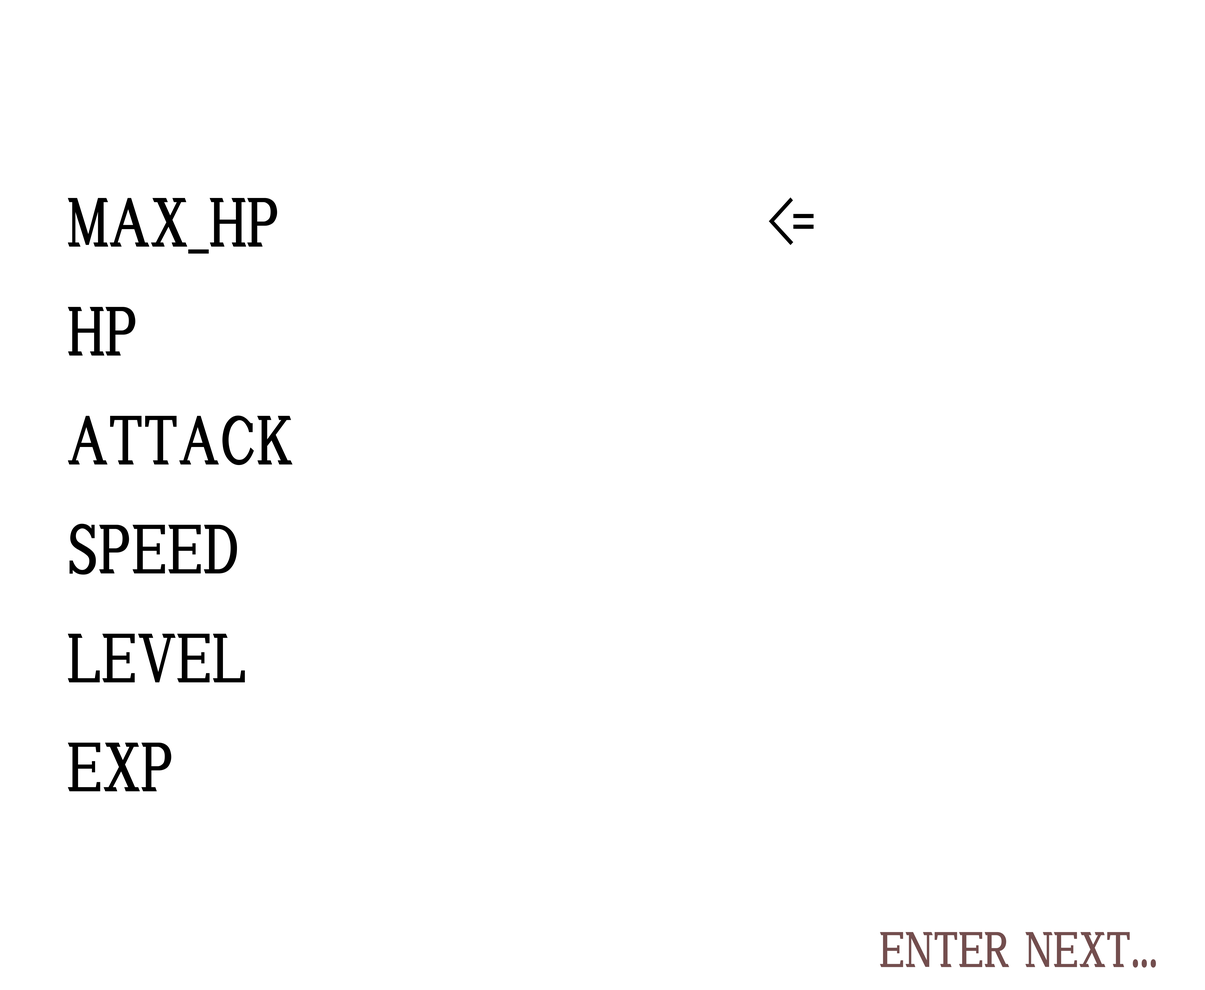
<style>
.page{position:relative;width:1205px;height:990px;background:#ffffff}
.page>*{position:absolute;margin:0}
.t1{font:62.2px "HGSSoeiPresenceEB";color:#000000}
.t2{font:62.2px "HGSSoeiPresenceEB";letter-spacing:-0.2em;color:#000000}
.t3{font:44.6px "HGSSoeiPresenceEB";color:#734e4e}
</style>
<div class="page">
<p class="t1" style="left:68px;top:198px;width:225px;height:593px">MAX_HP<br>HP<br>ATTACK<br>SPEED<br>LEVEL<br>EXP</p>
<p class="t2" style="left:768px;top:197px;width:45px;height:48px">&lt;=</p>
<p class="t3" style="left:880px;top:932px;width:275px;height:36px">ENTER NEXT...</p>
</div>
